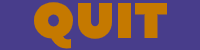
<style>
.page{position:relative;width:200px;height:50px;background:#483d8b}
.page>*{position:absolute;margin:0}
.t1{font:50px "PeaceSans";color:#c57900}
</style>
<div class="page">
<p class="t1" style="left:34px;top:2px;width:133px;height:47px">QUIT</p>
</div>
